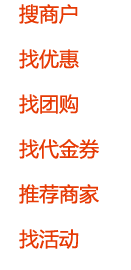
<style>
.page{position:relative;width:131px;height:270px;background:#ffffff}
.page>*{position:absolute;margin:0}
.t1{font:20px/45px "MicrosoftYaHei";color:#e63a05}
</style>
<div class="page">
<p class="t1" style="left:19px;top:4px;width:80px;height:245px">搜商户<br>找优惠<br>找团购<br>找代金券<br>推荐商家<br>找活动</p>
</div>
